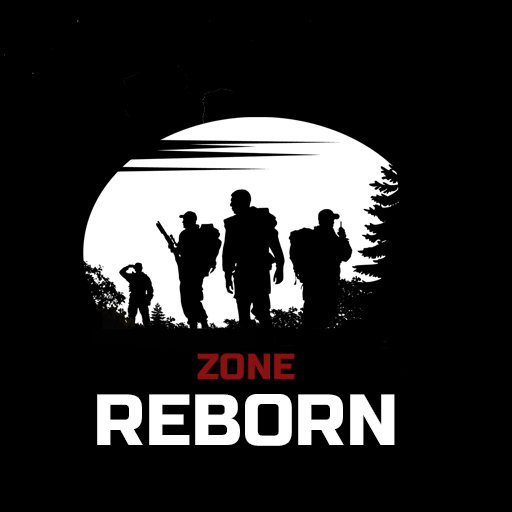
<style>
.page{position:relative;width:512px;height:512px;background:#000000}
.page>*{position:absolute;margin:0}
.t1{font:36px "RussoOne-Regular";color:#8b1010}
.t2{font:72px "RussoOne-Regular";color:#ffffff}
</style>
<div class="page">
<p class="t1" style="left:197px;top:353px;width:98px;height:27px">ZONE</p>
<p class="t2" style="left:97px;top:394px;width:298px;height:52px">REBORN</p>
</div>
